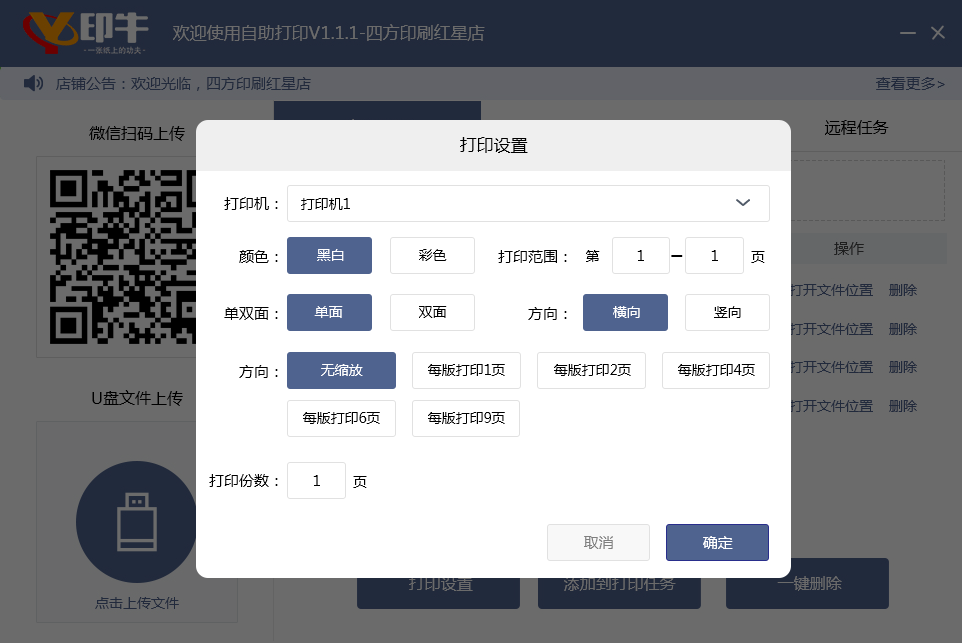
<style>
.page{position:relative;width:962px;height:643px;background:#ffffff}
.page>*{position:absolute;margin:0}
.t1{font:17px "MicrosoftYaHei";color:#000000}
.t2{font:15px "MicrosoftYaHei";color:#000000}
.t3{font:14px "MicrosoftYaHei";color:#000000}
.t4{font:14px "MicrosoftYaHei";color:#ffffff}
.t5{font:24px "MicrosoftYaHei";color:#000000}
.t6{font:15px "MicrosoftYaHei";color:#7f7f7f}
.t7{font:15px "MicrosoftYaHei";color:#ffffff}
</style>
<div class="page">
<p class="t1" style="left:460px;top:137px;width:68px;height:16px">打印设置</p>
<p class="t2" style="left:224px;top:197px;width:54px;height:13px">打印机：</p>
<p class="t3" style="left:301px;top:198px;width:49px;height:12px">打印机1</p>
<p class="t2" style="left:239px;top:250px;width:39px;height:13px">颜色：</p>
<p class="t4" style="left:317px;top:249px;width:27px;height:12px">黑白</p>
<p class="t3" style="left:419px;top:249px;width:28px;height:12px">彩色</p>
<p class="t2" style="left:498px;top:250px;width:69px;height:13px">打印范围：</p>
<p class="t3" style="left:586px;top:250px;width:14px;height:12px">第</p>
<p class="t3" style="left:637px;top:250px;width:7px;height:11px">1</p>
<p class="t5" style="left:671px;top:255px;width:12px;height:2px">_</p>
<p class="t3" style="left:711px;top:250px;width:7px;height:11px">1</p>
<p class="t3" style="left:751px;top:251px;width:14px;height:12px">页</p>
<p class="t2" style="left:224px;top:307px;width:54px;height:13px">单双面：</p>
<p class="t4" style="left:314px;top:306px;width:29px;height:12px">单面</p>
<p class="t3" style="left:419px;top:306px;width:28px;height:12px">双面</p>
<p class="t2" style="left:528px;top:307px;width:39px;height:13px">方向：</p>
<p class="t4" style="left:613px;top:306px;width:27px;height:12px">横向</p>
<p class="t3" style="left:714px;top:306px;width:27px;height:12px">竖向</p>
<p class="t2" style="left:239px;top:365px;width:39px;height:13px">方向：</p>
<p class="t4" style="left:321px;top:364px;width:42px;height:12px">无缩放</p>
<p class="t3" style="left:428px;top:364px;width:77px;height:12px">每版打印1页</p>
<p class="t3" style="left:554px;top:364px;width:77px;height:12px">每版打印2页</p>
<p class="t3" style="left:678px;top:364px;width:77px;height:12px">每版打印4页</p>
<p class="t3" style="left:303px;top:412px;width:77px;height:12px">每版打印6页</p>
<p class="t3" style="left:428px;top:412px;width:77px;height:12px">每版打印9页</p>
<p class="t2" style="left:209px;top:474px;width:69px;height:13px">打印份数：</p>
<p class="t3" style="left:313px;top:475px;width:7px;height:11px">1</p>
<p class="t3" style="left:353px;top:476px;width:14px;height:12px">页</p>
<p class="t6" style="left:584px;top:536px;width:29px;height:13px">取消</p>
<p class="t7" style="left:703px;top:536px;width:30px;height:13px">确定</p>
</div>
